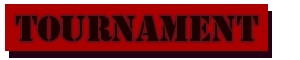
<style>
.page{position:relative;width:300px;height:60px;background:#ab0000}
.page>*{position:absolute;margin:0}
.t1{font:33.3px "StencilStd";color:#1d0000}
</style>
<div class="page">
<p class="t1" style="left:16px;top:16px;width:242px;height:25px">Tournament</p>
</div>
